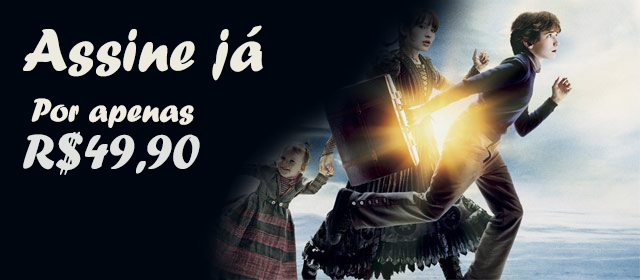
<style>
.page{position:relative;width:640px;height:280px;background:#000610}
.page>*{position:absolute;margin:0}
.t1{font:61.9px "ForteMT";color:#edebdf}
.t2{font:34.3px "ForteMT";color:#f0ece1}
.t3{font:52.4px "ForteMT";color:#e0e2df}
</style>
<div class="page">
<p class="t1" style="left:23px;top:25px;width:240px;height:56px">Assine já</p>
<p class="t2" style="left:31px;top:98px;width:163px;height:30px">Por apenas</p>
<p class="t3" style="left:23px;top:131px;width:177px;height:44px">R$49,90</p>
</div>
